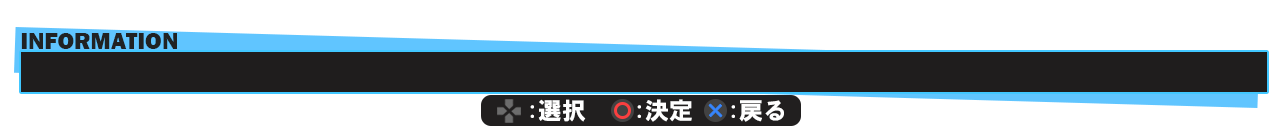
<style>
.page{position:relative;width:1280px;height:128px;background:#ffffff}
.page>*{position:absolute;margin:0}
.t1{font:24px "FranklinGothic-Heavy";color:#212223}
.t2{font:24px "HGSoeiKakugothicUB";color:#ffffff}
</style>
<div class="page">
<p class="t1" style="left:21px;top:33px;width:156px;height:16px">INFORMATION</p>
<p class="t2" style="left:530px;top:99px;width:56px;height:23px">:選択</p>
<p class="t2" style="left:637px;top:99px;width:55px;height:23px">:決定</p>
<p class="t2" style="left:731px;top:100px;width:53px;height:22px">:戻る</p>
</div>
